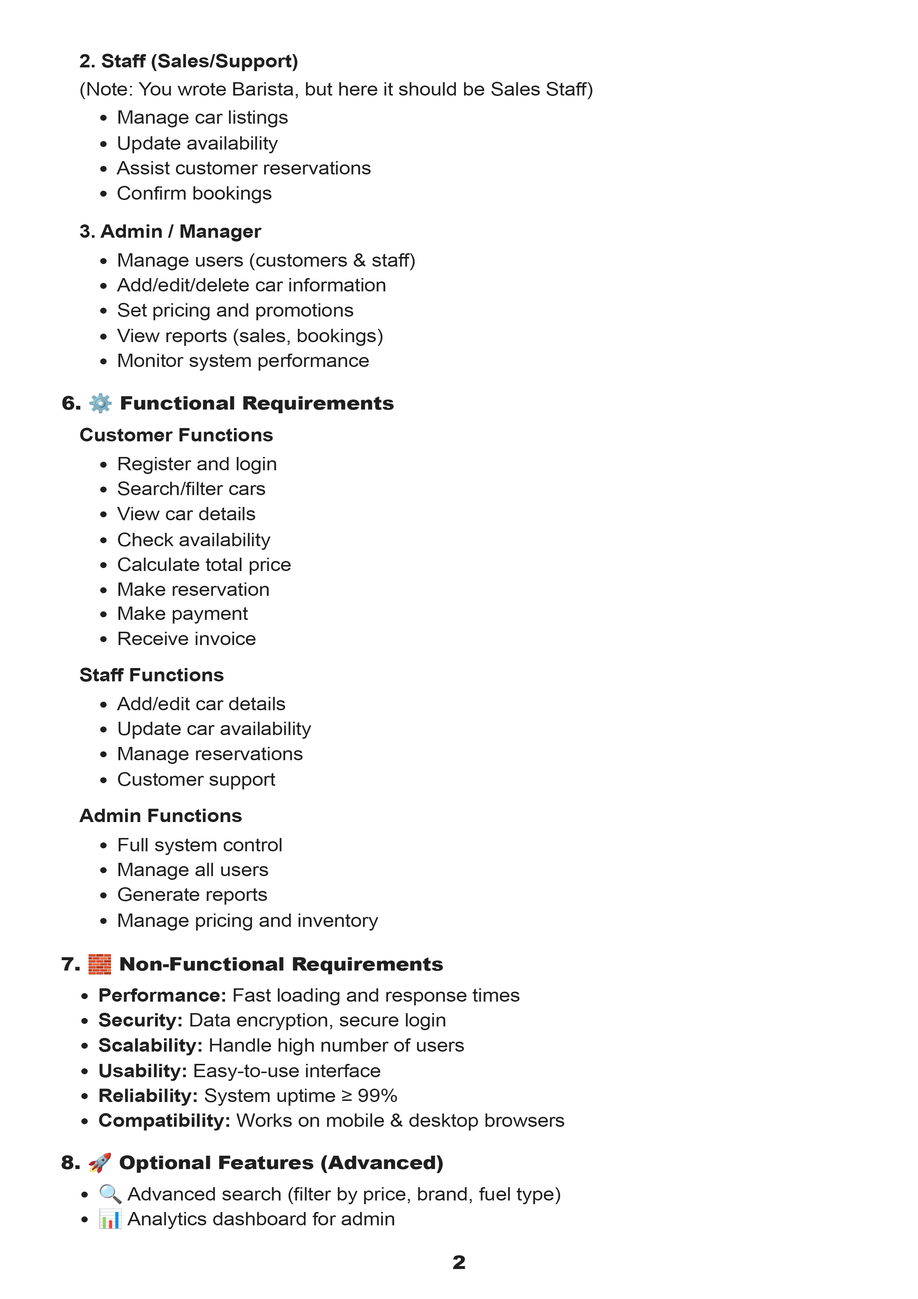
<style>
.page{position:relative;width:918px;height:1299px;background:#ffffff}
.page>*{position:absolute;margin:0}
.t1{font:18.5px "Arial-BoldMT";letter-spacing:-0.01em;color:#202020;scale:1.1 1}
.t2{font:18.5px "ArialMT";letter-spacing:-0.01em;color:#202020;scale:1.1 1}
.t3{font:18.6px "ArialMT";letter-spacing:-0.01em;color:#202020;scale:1.1 1}
.t4{font:18.5px "Arial-Black";letter-spacing:-0.01em;color:#202020;scale:1.1 1}
.t5{font:18.5px "NotoColorEmoji-SVG";letter-spacing:-0.01em;color:#202020;scale:1.1 1}
</style>
<div class="page">
<p class="t1" style="left:80px;top:54px;width:218px;height:17px">2. Staff (Sales/Support)</p>
<p class="t2" style="left:80px;top:82px;width:513px;height:17px">(Note: You wrote Barista, but here it should be Sales Staff)</p>
<p class="t2" style="left:118px;top:110px;width:170px;height:17px">Manage car listings</p>
<p class="t3" style="left:118px;top:136px;width:160px;height:17px">Update availability</p>
<p class="t3" style="left:117px;top:161px;width:254px;height:13px">Assist customer reservations</p>
<p class="t3" style="left:117px;top:186px;width:155px;height:17px">Confirm bookings</p>
<p class="t1" style="left:80px;top:224px;width:182px;height:17px">3. Admin / Manager</p>
<p class="t2" style="left:118px;top:253px;width:297px;height:17px">Manage users (customers &amp; staff)</p>
<p class="t2" style="left:117px;top:278px;width:268px;height:13px">Add/edit/delete car information</p>
<p class="t2" style="left:118px;top:303px;width:236px;height:17px">Set pricing and promotions</p>
<p class="t2" style="left:117px;top:329px;width:266px;height:17px">View reports (sales, bookings)</p>
<p class="t2" style="left:118px;top:354px;width:251px;height:17px">Monitor system performance</p>
<p class="t4" style="left:62px;top:393px;width:332px;height:21px">6. <span class="t5">⚙️</span> Functional Requirements</p>
<p class="t1" style="left:80px;top:428px;width:193px;height:13px">Customer Functions</p>
<p class="t2" style="left:118px;top:457px;width:158px;height:17px">Register and login</p>
<p class="t2" style="left:118px;top:481px;width:147px;height:14px">Search/filter cars</p>
<p class="t2" style="left:117px;top:507px;width:138px;height:13px">View car details</p>
<p class="t2" style="left:118px;top:532px;width:153px;height:18px">Check availability</p>
<p class="t2" style="left:118px;top:557px;width:173px;height:18px">Calculate total price</p>
<p class="t2" style="left:118px;top:582px;width:151px;height:14px">Make reservation</p>
<p class="t2" style="left:118px;top:606px;width:130px;height:17px">Make payment</p>
<p class="t2" style="left:118px;top:632px;width:138px;height:13px">Receive invoice</p>
<p class="t1" style="left:80px;top:668px;width:144px;height:14px">Staff Functions</p>
<p class="t2" style="left:117px;top:697px;width:168px;height:13px">Add/edit car details</p>
<p class="t2" style="left:118px;top:722px;width:193px;height:17px">Update car availability</p>
<p class="t2" style="left:118px;top:747px;width:185px;height:17px">Manage reservations</p>
<p class="t2" style="left:118px;top:772px;width:157px;height:17px">Customer support</p>
<p class="t1" style="left:79px;top:809px;width:163px;height:13px">Admin Functions</p>
<p class="t2" style="left:118px;top:838px;width:164px;height:17px">Full system control</p>
<p class="t2" style="left:118px;top:863px;width:150px;height:17px">Manage all users</p>
<p class="t2" style="left:118px;top:887px;width:149px;height:17px">Generate reports</p>
<p class="t2" style="left:118px;top:913px;width:260px;height:17px">Manage pricing and inventory</p>
<p class="t4" style="left:61px;top:954px;width:382px;height:20px">7. <span class="t5">🧱</span> Non-Functional Requirements</p>
<p class="t2" style="left:100px;top:988px;width:420px;height:17px"><span class="t1">Performance:</span> Fast loading and response times</p>
<p class="t2" style="left:99px;top:1013px;width:346px;height:17px"><span class="t1">Security:</span> Data encryption, secure login</p>
<p class="t2" style="left:99px;top:1038px;width:365px;height:17px"><span class="t1">Scalability:</span> Handle high number of users</p>
<p class="t2" style="left:99px;top:1064px;width:282px;height:17px"><span class="t1">Usability:</span> Easy-to-use interface</p>
<p class="t2" style="left:100px;top:1088px;width:297px;height:17px"><span class="t1">Reliability:</span> System uptime ≥ 99%</p>
<p class="t2" style="left:99px;top:1113px;width:466px;height:17px"><span class="t1">Compatibility:</span> Works on mobile &amp; desktop browsers</p>
<p class="t4" style="left:61px;top:1152px;width:382px;height:21px">8. <span class="t5">🚀</span> Optional Features (Advanced)</p>
<p class="t2" style="left:99px;top:1184px;width:462px;height:20px"><span class="t5">🔍</span> Advanced search (filter by price, brand, fuel type)</p>
<p class="t2" style="left:99px;top:1208px;width:295px;height:21px"><span class="t5">📊</span> Analytics dashboard for admin</p>
<p class="t4" style="left:453px;top:1255px;width:12px;height:14px">2</p>
</div>
